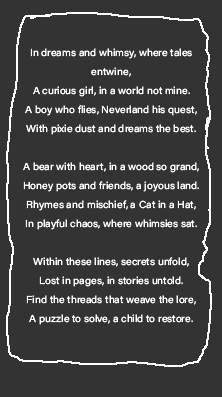
<style>
.page{position:relative;width:222px;height:397px;background:#333333}
.page>*{position:absolute;margin:0}
.t1{font:10px/19px "AcuminConcept_400.000wght_106.000wdth";color:#ffffff}
</style>
<div class="page">
<p class="t1" style="left:23px;top:48px;width:176px;height:277px;text-align:center">In dreams and whimsy, where tales entwine,<br>A curious girl, in a world not mine.<br>A boy who flies, Neverland his quest,<br>With pixie dust and dreams the best.<br><br>A bear with heart, in a wood so grand,<br>Honey pots and friends, a joyous land.<br>Rhymes and mischief, a Cat in a Hat,<br>In playful chaos, where whimsies sat.<br><br>Within these lines, secrets unfold,<br>Lost in pages, in stories untold.<br>Find the threads that weave the lore,<br>A puzzle to solve, a child to restore.</p>
</div>
